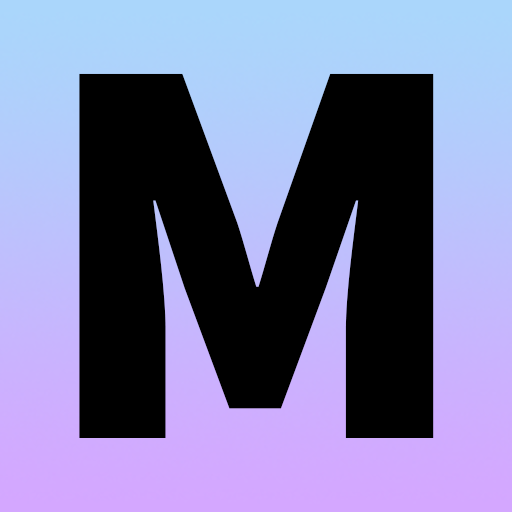
<style>
.page{position:relative;width:512px;height:512px;background:#000000}
.page>*{position:absolute;margin:0}
.t1{font:560px "SourceSansRoman-Black";color:#000000}
</style>
<div class="page">
<p class="t1" style="left:79px;top:73px;width:355px;height:365px">M</p>
</div>
